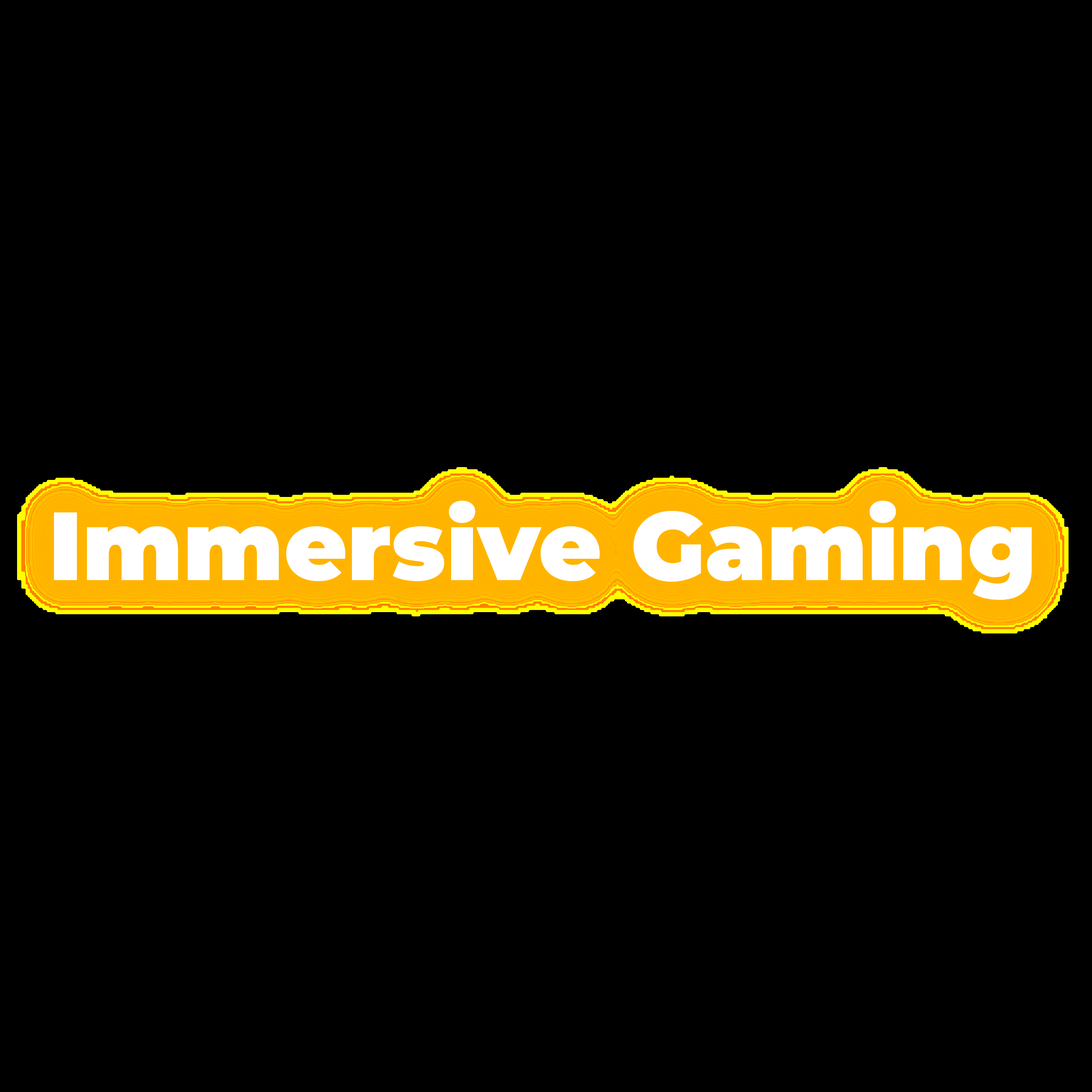
<style>
.page{position:relative;width:1092px;height:1092px;background:#000000}
.page>*{position:absolute;margin:0}
.t1{font:96.7px "Montserrat-Black";color:#ffffff}
</style>
<div class="page">
<p class="t1" style="left:0px;top:0px;width:1092px;height:1092px;text-align:center">Immersive Gaming</p>
</div>
